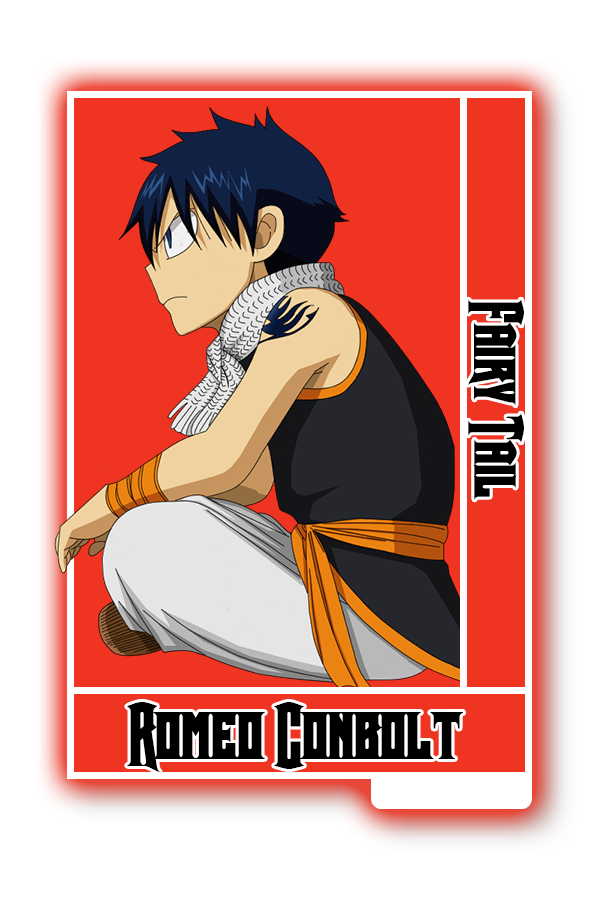
<style>
.page{position:relative;width:600px;height:900px;background:#ffffff}
.page>*{position:absolute;margin:0}
.t1{font:61.5px "Crown-Title";color:#000000}
.t2{font:70.1px "Crown-Title";color:#000000}
</style>
<div class="page">
<p class="t1" style="left:468px;top:299px;width:56px;height:201px;rotate:90deg">Fairy Tail</p>
<p class="t2" style="left:127px;top:702px;width:336px;height:70px">Romeo Conbolt</p>
</div>
